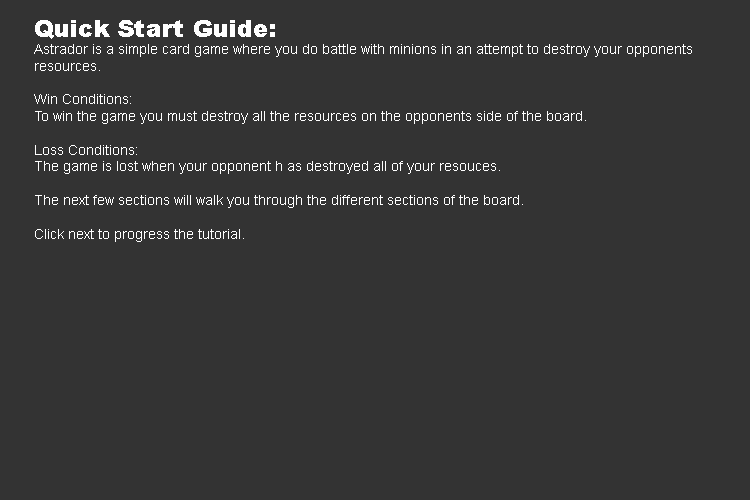
<style>
.page{position:relative;width:750px;height:500px;background:#333333}
.page>*{position:absolute;margin:0}
.t1{font:14px "ArialMT";color:#ffffff}
.t2{font:24px "Arial-Black";color:#ffffff}
</style>
<div class="page">
<p class="t1" style="left:34px;top:20px;width:658px;height:222px"><span class="t2">Quick Start Guide:<br></span>Astrador is a simple card game where you do battle with minions in an attempt to destroy your opponents<br>resources.<br><br>Win Conditions:<br>To win the game you must destroy all the resources on the opponents side of the board.<br><br>Loss Conditions:<br>The game is lost when your opponent h as destroyed all of your resouces. <br><br>The next few sections will walk you through the different sections of the board.<br><br>Click next to progress the tutorial.</p>
</div>
